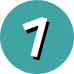
<style>
.page{position:relative;width:74px;height:74px;background:#40a3a4}
.page>*{position:absolute;margin:0}
.t1{font:70.9px "SuperspaceBold";color:#ffffff}
</style>
<div class="page">
<p class="t1" style="left:22px;top:17px;width:26px;height:40px;rotate:15deg">1</p>
</div>
